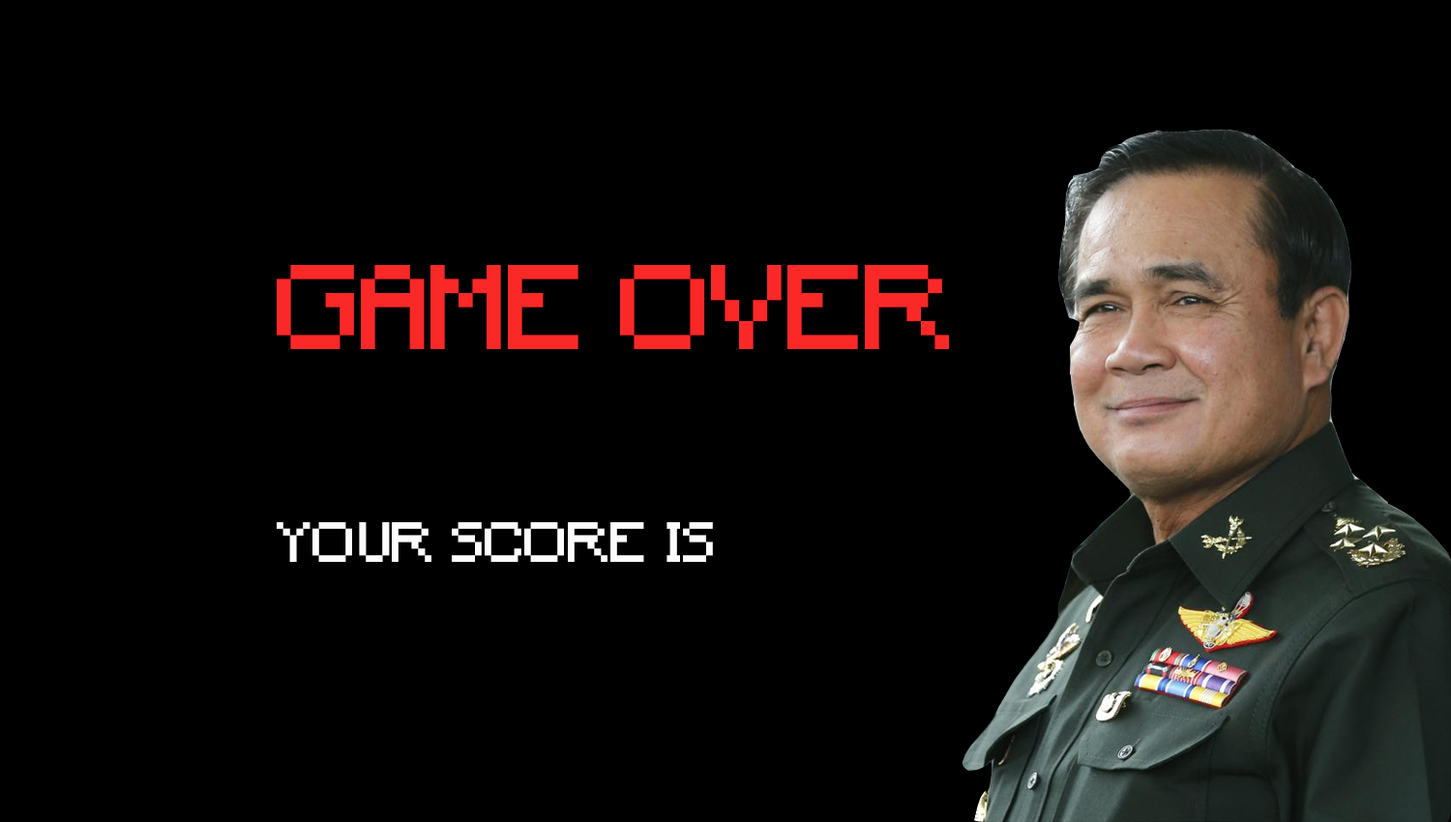
<style>
.page{position:relative;width:1451px;height:822px;background:#000000}
.page>*{position:absolute;margin:0}
.t1{font:112px "Minecraft";color:#fb2828}
.t2{font:52.9px "Minecraft";color:#fdfcfc}
</style>
<div class="page">
<p class="t1" style="left:277px;top:265px;width:672px;height:84px">GAME OVER</p>
<p class="t2" style="left:277px;top:522px;width:436px;height:40px">YOUR SCORE IS</p>
</div>
